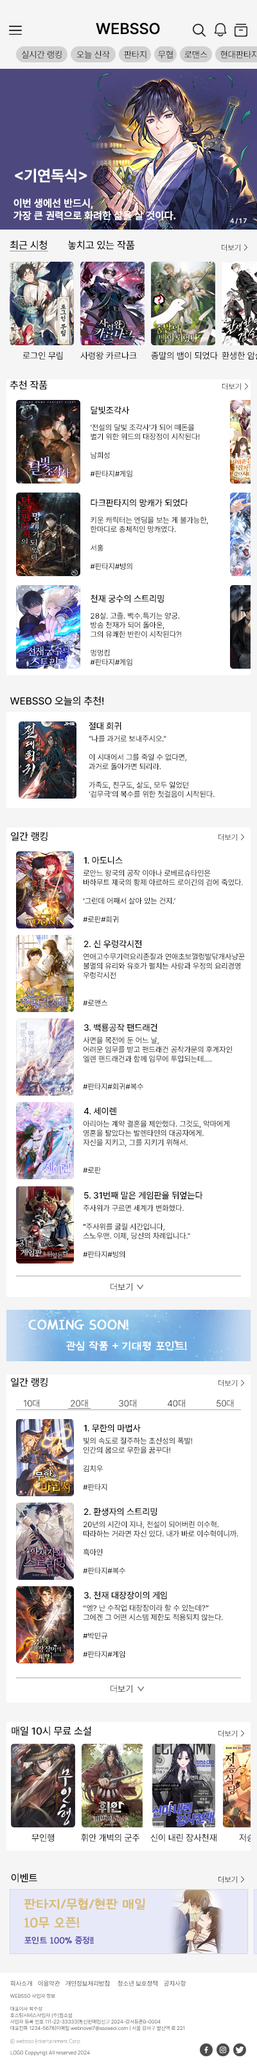
<style>
.page{position:relative;width:257px;height:2064px;background:#ffffff}
.page>*{position:absolute;margin:0}
.t1{font:15.4px "Pretendard-Medium";color:#000000;font-weight:bold}
.t2{font:9px "Pretendard-Light";color:#000000}
.t3{font:9px "Pretendard-Light"}
.t4{font:15.4px "Pretendard-SemiBold";color:#ffffff;font-weight:bold}
.t5{font:10.3px "Pretendard-SemiBold";color:#ffffff;font-weight:bold}
.t6{font:6.4px "Pretendard-Regular";letter-spacing:0.2em;color:#ffffff;font-weight:bold}
.t7{font:10.3px "Pretendard-Medium";color:#000000}
.t8{font:7.7px "Pretendard-Light"}
.t9{font:9px "Pretendard-Regular";color:#000000}
.t10{font:9px "Pretendard-Medium";color:#000000}
.t11{font:7.7px "Pretendard-Regular";color:#000000}
.t12{font:15.4px "omyu_pretty";color:#ffffff;font-weight:bold}
.t13{font:12.9px "omyu_pretty";color:#ffffff;font-weight:bold}
.t14{font:15.4px "omyu_pretty";color:#d9bc76;font-weight:bold}
.t15{font:10.3px "omyu_pretty";color:#5a52a8;font-weight:bold}
.t16{font:6.4px "Pretendard-Light"}
.t17{font:5.1px/6.4px "Pretendard-Light"}
.t18{font:5.1px/6.4px "NanumSquareL"}
.t19{font:5.1px "NanumSquareR"}
</style>
<div class="page">
<p class="t1" style="left:96px;top:22px;width:64px;height:13px">WEBSSO</p>
<p class="t2" style="left:22px;top:50px;width:40px;height:9px">실시간 랭킹</p>
<p class="t2" style="left:76px;top:50px;width:34px;height:9px">오늘 신작</p>
<p class="t2" style="left:124px;top:50px;width:23px;height:9px">판타지</p>
<p class="t3" style="left:158px;top:50px;width:15px;height:9px">무협</p>
<p class="t2" style="left:184px;top:50px;width:24px;height:9px">로맨스</p>
<p class="t2" style="left:221px;top:50px;width:37px;height:9px">현대판타지</p>
<p class="t4" style="left:15px;top:168px;width:72px;height:15px">&lt;기연독식&gt;</p>
<p class="t5" style="left:14px;top:198px;width:162px;height:23px">이번 생에선 반드시, <br>가장 큰 권력으로 화려한 삶을 살 것이다.</p>
<p class="t6" style="left:230px;top:218px;width:17px;height:6px">4/17</p>
<p class="t7" style="left:10px;top:240px;width:37px;height:9px">최근 시청</p>
<p class="t7" style="left:68px;top:240px;width:67px;height:9px">놓치고 있는 작품</p>
<p class="t8" style="left:222px;top:244px;width:18px;height:7px">더보기</p>
<p class="t9" style="left:22px;top:352px;width:41px;height:7px">로그인 무림</p>
<p class="t9" style="left:80px;top:352px;width:57px;height:8px">사령왕 카르나크</p>
<p class="t9" style="left:151px;top:352px;width:67px;height:8px">종말의 뱀이 되었다</p>
<p class="t7" style="left:10px;top:380px;width:38px;height:10px">추천 작품</p>
<p class="t8" style="left:222px;top:383px;width:19px;height:7px">더보기</p>
<p class="t10" style="left:91px;top:406px;width:38px;height:9px">달빛조각사</p>
<p class="t11" style="left:90px;top:424px;width:110px;height:53px">'전설의 달빛 조각사'가 되어 떼돈을 <br>벌기 위한 위드의 대장정이 시작된다!<br><br>남희성<br><br>#판타지#게임</p>
<p class="t10" style="left:91px;top:499px;width:97px;height:8px">다크판타지의 망캐가 되었다</p>
<p class="t11" style="left:90px;top:516px;width:118px;height:54px">키운 캐릭터는 엔딩을 보는 게 불가능한, <br>한마디로 총체적인 망캐였다.<br><br>서홍<br><br>#판타지#빙의</p>
<p class="t10" style="left:91px;top:595px;width:73px;height:8px">천재 궁수의 스트리밍</p>
<p class="t11" style="left:90px;top:612px;width:91px;height:53px">28살. 고졸. 백수.특기는 양궁.<br>방송 천재가 되어 돌아온, <br>그의 유쾌한 반란이 시작된다?!<br><br>멍멍킴<br>#판타지#게임</p>
<p class="t7" style="left:10px;top:696px;width:94px;height:9px">WEBSSO 오늘의 추천!</p>
<p class="t10" style="left:89px;top:722px;width:33px;height:8px">절대 회귀</p>
<p class="t11" style="left:89px;top:735px;width:126px;height:63px">"나를 과거로 보내주시오."<br><br>이 시대에서 그를 죽일 수 없다면, <br>과거로 돌아가면 되리라. <br><br>가족도, 친구도, 삶도, 모두 잃었던 <br>'검무극'의 복수를 위한 첫걸음이 시작된다.</p>
<p class="t7" style="left:11px;top:831px;width:37px;height:10px">일간 랭킹</p>
<p class="t8" style="left:219px;top:834px;width:18px;height:7px">더보기</p>
<p class="t10" style="left:84px;top:856px;width:39px;height:9px">1. 아도니스</p>
<p class="t11" style="left:83px;top:869px;width:160px;height:54px">로안느 왕국의 공작 이아나 로베르슈타인은 <br>바하무트 제국의 황제 아르하드 로이긴의 검에 죽었다.<br><br>‘그런데 어째서 살아 있는 건지.’<br><br>#로판#회귀</p>
<p class="t10" style="left:84px;top:940px;width:58px;height:8px">2. 신 우렁각시전</p>
<p class="t11" style="left:83px;top:953px;width:162px;height:53px">연애고수무기력요리존잘과 연애초보껄렁발닦개사냥꾼<br>불멸의 유리와 유호가 펼치는 사랑과 우정의 요리경영 <br>우렁각시전<br><br><br>#로맨스</p>
<p class="t10" style="left:84px;top:1023px;width:74px;height:9px">3. 백룡공작 팬드래건</p>
<p class="t11" style="left:83px;top:1036px;width:149px;height:54px">사면을 목전에 둔 어느 날,<br>어려운 임무를 받고 팬드래건 공작가문의 후계자인<br>엘렌 팬드래건과 함께 임무에 투입되는데….<br><br><br>#판타지#회귀#복수</p>
<p class="t10" style="left:84px;top:1107px;width:32px;height:8px">4. 세이렌</p>
<p class="t11" style="left:83px;top:1120px;width:147px;height:53px">아리아는 계약 결혼을 제안했다. 그것도, 악마에게 <br>영혼을 팔았다는 발렌타인의 대공자에게.<br>자신을 지키고, 그를 지키기 위해서.<br><br><br>#로판</p>
<p class="t10" style="left:84px;top:1191px;width:119px;height:9px">5. 31번째 말은 게임판을 뒤엎는다</p>
<p class="t11" style="left:83px;top:1204px;width:107px;height:53px">주사위가 구르면 세계가 변화했다.<br><br>"주사위를 굴릴 시간입니다, <br>스노우맨. 이제, 당신의 차례입니다."<br><br>#판타지#빙의</p>
<p class="t3" style="left:111px;top:1282px;width:21px;height:9px">더보기</p>
<p class="t12" style="left:28px;top:1319px;width:101px;height:11px">COMING SOON!</p>
<p class="t13" style="left:66px;top:1340px;width:121px;height:11px">관심 작품 + 기대평 포인트!</p>
<p class="t7" style="left:11px;top:1377px;width:37px;height:10px">일간 랭킹</p>
<p class="t8" style="left:219px;top:1380px;width:18px;height:7px">더보기</p>
<p class="t2" style="left:24px;top:1399px;width:15px;height:8px">10대</p>
<p class="t2" style="left:71px;top:1399px;width:17px;height:8px">20대</p>
<p class="t2" style="left:119px;top:1399px;width:17px;height:8px">30대</p>
<p class="t2" style="left:168px;top:1399px;width:17px;height:8px">40대</p>
<p class="t2" style="left:217px;top:1399px;width:17px;height:8px">50대</p>
<p class="t10" style="left:84px;top:1424px;width:57px;height:8px">1. 무한의 마법사</p>
<p class="t11" style="left:83px;top:1437px;width:109px;height:53px">빛의 속도로 질주하는 초신성의 폭발! <br>인간의 몸으로 무한을 꿈꾸다!<br><br>김치우<br><br>#판타지</p>
<p class="t10" style="left:84px;top:1507px;width:74px;height:9px">2. 환생자의 스트리밍</p>
<p class="t11" style="left:83px;top:1520px;width:156px;height:54px">20년의 시간이 지나, 전설이 되어버린 이수혁.<br>따라하는 거라면 자신 있다. 내가 바로 이수혁이니까.<br><br>흑아인<br><br>#판타지#복수</p>
<p class="t10" style="left:84px;top:1591px;width:83px;height:8px">3. 천재 대장장이의 게임</p>
<p class="t11" style="left:83px;top:1604px;width:140px;height:53px">“엥? 난 수작업 대장장이라 할 수 있는데?”<br>그에겐 그 어떤 시스템 제한도 적용되지 않는다.<br><br>#박민규<br><br>#판타지#게임</p>
<p class="t3" style="left:111px;top:1684px;width:21px;height:9px">더보기</p>
<p class="t7" style="left:12px;top:1726px;width:79px;height:9px">매일 10시 무료 소설</p>
<p class="t8" style="left:219px;top:1730px;width:18px;height:7px">더보기</p>
<p class="t9" style="left:32px;top:1833px;width:23px;height:8px">무인행</p>
<p class="t9" style="left:81px;top:1833px;width:59px;height:9px">휘안 개벽의 군주</p>
<p class="t9" style="left:150px;top:1833px;width:67px;height:9px">신이 내린 장사천재</p>
<p class="t7" style="left:11px;top:1873px;width:26px;height:9px">이벤트</p>
<p class="t8" style="left:219px;top:1876px;width:18px;height:7px">더보기</p>
<p class="t14" style="left:24px;top:1898px;width:121px;height:30px">판타지/무협/현판 매일 <br>10무 오픈!</p>
<p class="t15" style="left:24px;top:1936px;width:70px;height:8px">포인트 100% 증정!!</p>
<p class="t16" style="left:10px;top:1980px;width:22px;height:6px">회사소개</p>
<p class="t16" style="left:38px;top:1980px;width:22px;height:6px">이용약관</p>
<p class="t16" style="left:66px;top:1980px;width:43px;height:6px">개인정보처리방침</p>
<p class="t16" style="left:118px;top:1980px;width:40px;height:6px">청소년 보호정책</p>
<p class="t16" style="left:164px;top:1980px;width:22px;height:6px">공지사항</p>
<p class="t17" style="left:10px;top:1993px;width:174px;height:51px">WEBSSO 사업자 정보<br><br>대표이사 박주성<br>호스팅서비스사업자 (주)웹소설<br>사업자 등록 번호 111-22-33333|통신판매업신고 2024-강서등촌B-0004<br>대표전화 1234-5678|이메일 webnovel7@ssoseol.com | 서울 강서구 발산역 로 221<br><br><span class="t18">ⓒ websso Entertainment Corp.</span></p>
<p class="t19" style="left:10px;top:2050px;width:80px;height:5px">LOGO Coppyrigt All reserved 2024</p>
</div>
